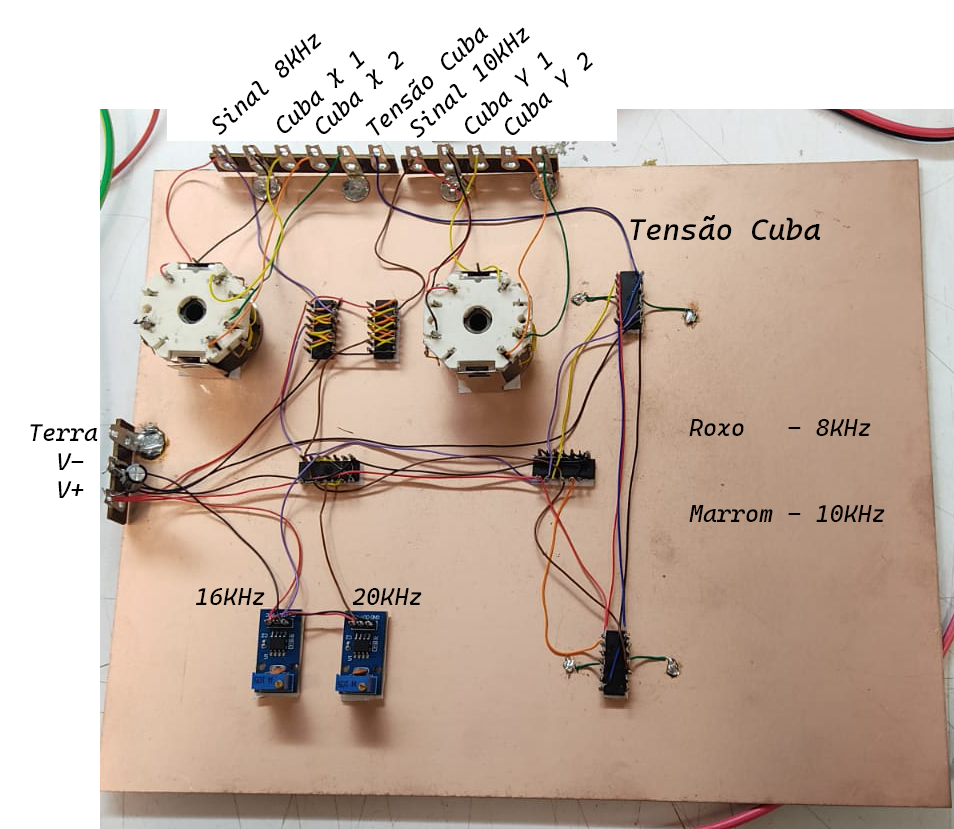
<style>
.page{position:relative;width:954px;height:829px;background:#ffffff}
.page>*{position:absolute;margin:0}
.t1{font:24px "CascadiaCode-Italic";color:#000000}
.t2{font:30px "CascadiaCode-Italic";color:#000000}
</style>
<div class="page">
<p class="t1" style="left:365px;top:27px;width:124px;height:109px;rotate:-42deg">Tensão Cuba</p>
<p class="t1" style="left:410px;top:27px;width:120px;height:111px;rotate:-42deg">Sinal 10KHz</p>
<p class="t1" style="left:212px;top:33px;width:110px;height:102px;rotate:-42deg">Sinal 8KHz</p>
<p class="t1" style="left:277px;top:50px;width:88px;height:83px;rotate:-42deg">Cuba X 1</p>
<p class="t1" style="left:316px;top:51px;width:88px;height:83px;rotate:-42deg">Cuba X 2</p>
<p class="t1" style="left:465px;top:51px;width:88px;height:83px;rotate:-42deg">Cuba Y 1</p>
<p class="t1" style="left:505px;top:52px;width:88px;height:83px;rotate:-42deg">Cuba Y 2</p>
<p class="t2" style="left:630px;top:215px;width:191px;height:25px">Tensão Cuba</p>
<p class="t1" style="left:30px;top:424px;width:68px;height:74px">Terra<br>  V-<br>  V+</p>
<p class="t1" style="left:689px;top:419px;width:196px;height:103px">Roxo   - 8KHz<br><br><br>Marrom - 10KHz</p>
<p class="t1" style="left:196px;top:588px;width:69px;height:17px">16KHz</p>
<p class="t1" style="left:352px;top:588px;width:70px;height:17px">20KHz</p>
</div>
